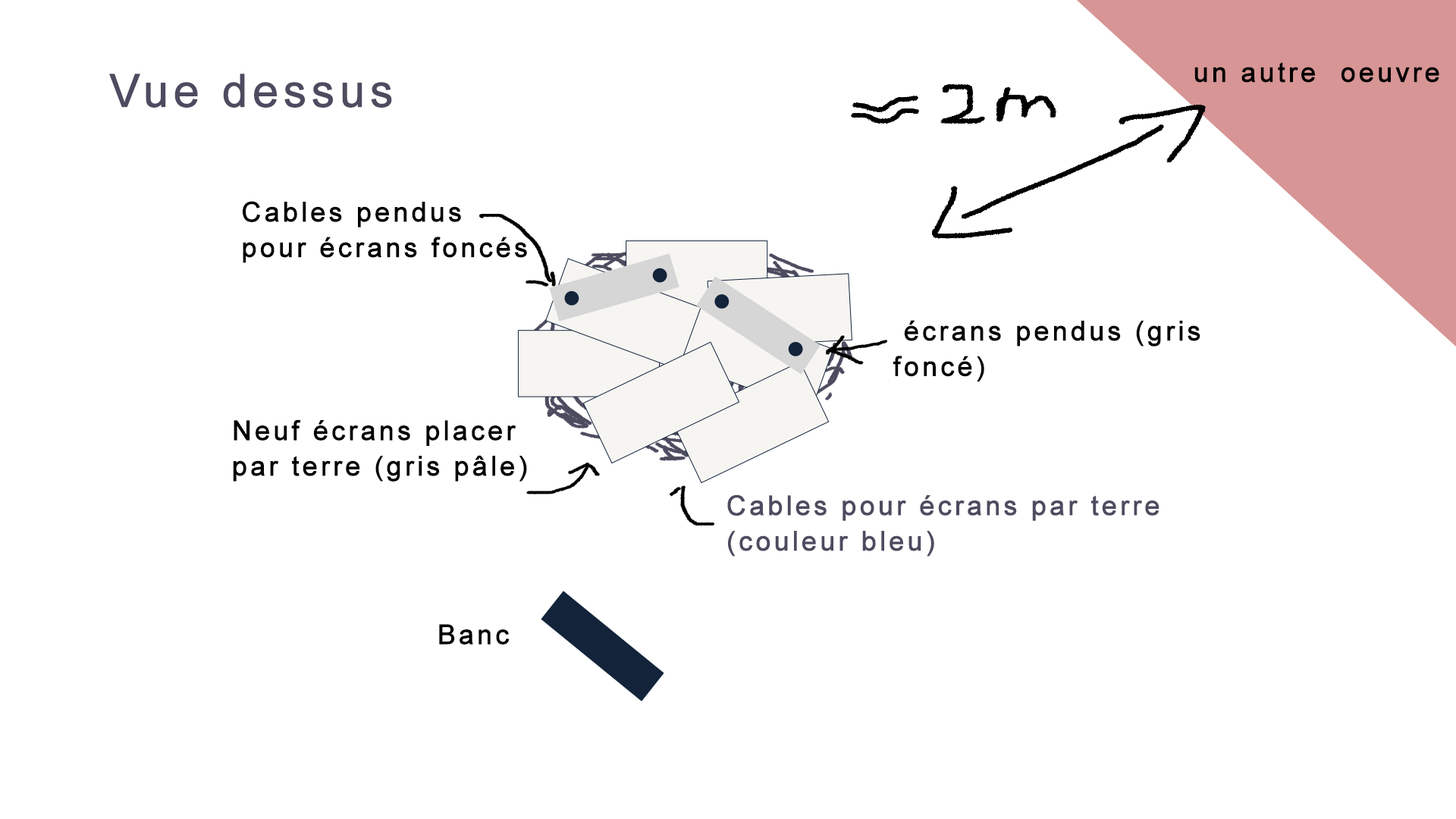
<style>
.page{position:relative;width:1456px;height:819px;background:#ffffff}
.page>*{position:absolute;margin:0}
.t1{font:27.3px "ArialMT";letter-spacing:0.09em;color:#000000;font-weight:bold}
.t2{font:45.5px "ArialMT";letter-spacing:0.09em;color:#4d4b5f;font-weight:bold}
.t3{font:27.3px/35.5px "ArialMT";letter-spacing:0.09em;color:#000000;font-weight:bold}
.t4{font:27.3px/35.5px "ArialMT";letter-spacing:0.09em;color:#4d4b5f;font-weight:bold}
</style>
<div class="page">
<p class="t1" style="left:1194px;top:62px;width:245px;height:21px">un autre  oeuvre</p>
<p class="t2" style="left:109px;top:74px;width:283px;height:34px">Vue dessus</p>
<p class="t3" style="left:243px;top:201px;width:284px;height:62px">Cables pendus<br>pour écrans foncés</p>
<p class="t3" style="left:893px;top:320px;width:307px;height:62px">écrans pendus (gris foncé)</p>
<p class="t3" style="left:233px;top:419px;width:294px;height:63px">Neuf écrans placer par terre (gris pâle)</p>
<p class="t4" style="left:727px;top:494px;width:432px;height:63px">Cables pour écrans par terre (couleur bleu)</p>
<p class="t1" style="left:439px;top:624px;width:71px;height:21px">Banc</p>
</div>
